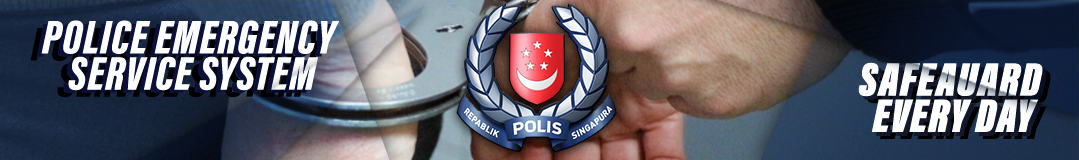
<style>
.page{position:relative;width:1079px;height:160px}
.page>*{position:absolute;margin:0}
.t1{font:48.3px/36.2px "AcuminConcept-ExtraCondensedBlackItalic";letter-spacing:0.025em;color:#ffffff}
.t2{font:48.3px/36.2px "AcuminConcept-ExtraCondensedUltraBlackItalic";letter-spacing:0.025em;color:#ffffff}
</style>
<div class="page">
<p class="t1" style="left:41px;top:20px;width:298px;height:71px;text-align:center">POLICE EMERGENCY <br>SERVICE SYSTEM</p>
<p class="t2" style="left:858px;top:62px;width:185px;height:70px;text-align:center">SAFEAUARD <br>EVERY DAY</p>
</div>
